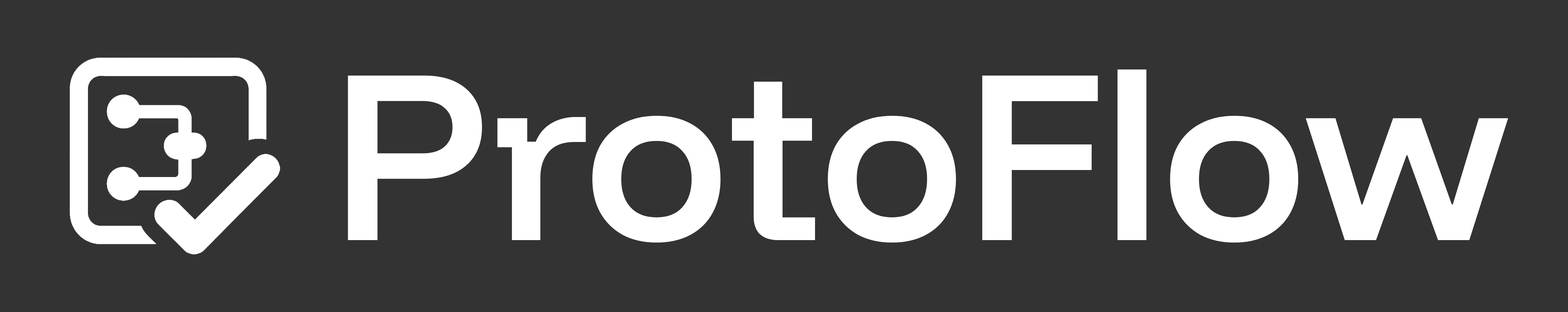
<style>
.page{position:relative;width:1568px;height:312px;background:#333333}
.page>*{position:absolute;margin:0}
.t1{font:243.4px "FunnelDisplayLight-Regular_549.000wght";color:#ffffff}
</style>
<div class="page">
<p class="t1" style="left:348px;top:69px;width:1160px;height:173px">ProtoFlow</p>
</div>
